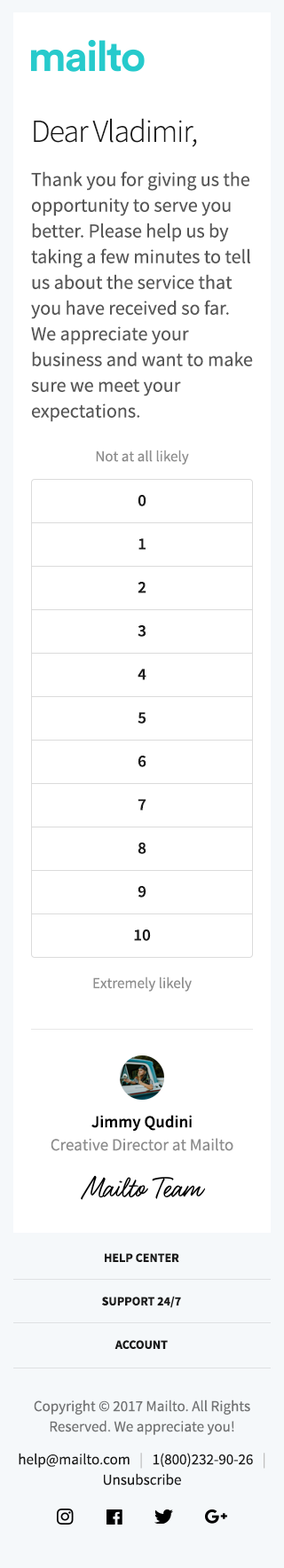
<style>
.page{position:relative;width:284px;height:1568px;background:#ffffff}
.page>*{position:absolute;margin:0}
.t1{font:31.9px "SourceSansPro-Light";letter-spacing:-0.03em;color:#1a1a1a}
.t2{font:19.5px/25.7px "SourceSansPro-Regular";color:#585858}
.t3{font:15.1px "SourceSansPro-Regular";color:#8d8d8d}
.t4{font:16.9px "SourceSansPro-Semibold";color:#1a1a1a}
.t5{font:16.9px "SourceSansPro-Semibold";color:#000000}
.t6{font:16.9px "SourceSansPro-Regular";color:#8d8d8d}
.t7{font:12.4px/43.5px "SourceSansPro-Bold";color:#1a1a1a}
.t8{font:15.1px/20.4px "SourceSansPro-Regular";color:#727374}
.t9{font:15.1px/20.4px "SourceSansPro-Regular";color:#1a1a1a}
.t10{font:15.1px/20.4px "SourceSansPro-Regular";color:#bebebe}
.t11{font:15.1px/20.4px "SourceSansPro-Regular";color:#bfbfbf}
</style>
<div class="page">
<p class="t1" style="left:34px;top:118px;width:163px;height:29px">Dear Vladimir,</p>
<p class="t2" style="left:31px;top:171px;width:222px;height:251px">Thank you for giving us the opportunity to serve you better. Please help us by taking a few minutes to tell us about the service that you have received so far. We appreciate your business and want to make sure we meet your expectations.</p>
<p class="t3" style="left:96px;top:450px;width:93px;height:15px">Not at all likely</p>
<p class="t4" style="left:137px;top:495px;width:9px;height:11px">0</p>
<p class="t4" style="left:138px;top:538px;width:7px;height:12px">1</p>
<p class="t4" style="left:137px;top:582px;width:9px;height:11px">2</p>
<p class="t4" style="left:137px;top:625px;width:8px;height:12px">3</p>
<p class="t4" style="left:137px;top:669px;width:9px;height:11px">4</p>
<p class="t4" style="left:137px;top:712px;width:8px;height:12px">5</p>
<p class="t4" style="left:137px;top:756px;width:9px;height:11px">6</p>
<p class="t4" style="left:137px;top:799px;width:9px;height:12px">7</p>
<p class="t4" style="left:137px;top:843px;width:9px;height:11px">8</p>
<p class="t4" style="left:137px;top:886px;width:9px;height:12px">9</p>
<p class="t4" style="left:134px;top:929px;width:17px;height:12px">10</p>
<p class="t3" style="left:93px;top:976px;width:99px;height:16px">Extremely likely</p>
<p class="t5" style="left:91px;top:1115px;width:101px;height:16px">Jimmy Qudini</p>
<p class="t6" style="left:51px;top:1138px;width:182px;height:13px">Creative Director at Mailto</p>
<p class="t7" style="left:102px;top:1253px;width:79px;height:96px;text-align:center">HELP CENTER<br>SUPPORT 24/7<br>ACCOUNT</p>
<p class="t8" style="left:19px;top:1399px;width:246px;height:87px;text-align:center">Copyright © 2017 Mailto. All Rights Reserved. We appreciate you!<br><span class="t9">help@mailto.com   </span><span class="t10">|   </span><span class="t9">1(800)232-90-26 </span><span class="t11">  |   </span><span class="t9">Unsubscribe</span></p>
</div>
